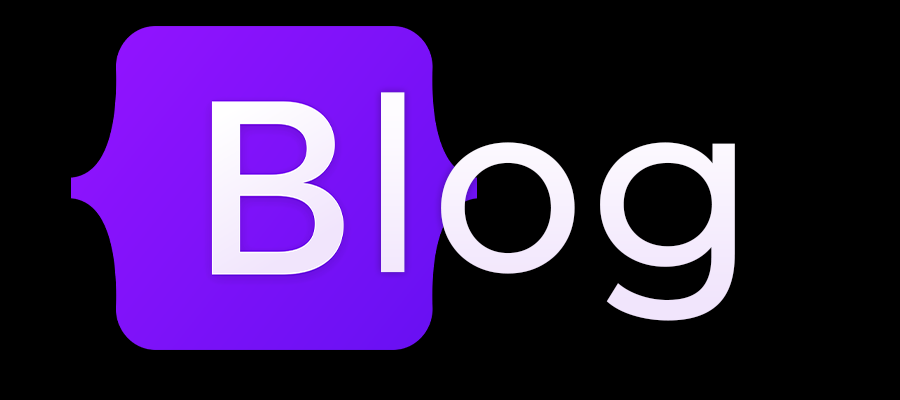
<style>
.page{position:relative;width:900px;height:400px;background:#000000}
.page>*{position:absolute;margin:0}
.t1{font:242px "Montserrat-Medium";letter-spacing:0.02em;color:#ffffff}
</style>
<div class="page">
<p class="t1" style="left:381px;top:92px;width:354px;height:229px">log</p>
</div>
